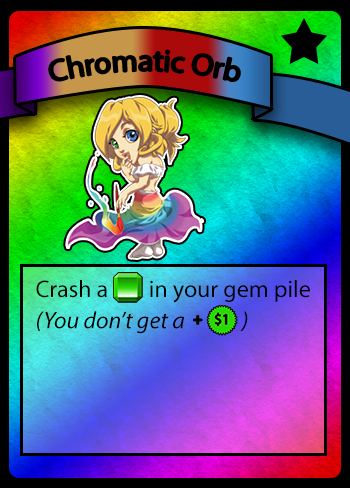
<style>
.page{position:relative;width:350px;height:488px}
.page>*{position:absolute;margin:0}
.t1{font:30px "MyriadPro-Regular";color:#000000}
.t2{font:24px "MyriadPro-Regular";color:#000000}
.t3{font:24px "MyriadPro-It";color:#000000}
</style>
<div class="page">
<p class="t1" style="left:49px;top:50px;width:191px;height:31px">Chromatic Orb</p>
<p class="t2" style="left:36px;top:280px;width:274px;height:54px">Crash a        in your gem pile<br><span class="t3">(You don’t get a             )</span></p>
</div>
